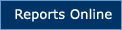
<style>
.page{position:relative;width:122px;height:30px;background:#003366}
.page>*{position:absolute;margin:0}
.t1{font:13px "Verdana";letter-spacing:0.01em;color:#ffffff}
</style>
<div class="page">
<p class="t1" style="left:15px;top:8px;width:97px;height:14px">Reports Online</p>
</div>
